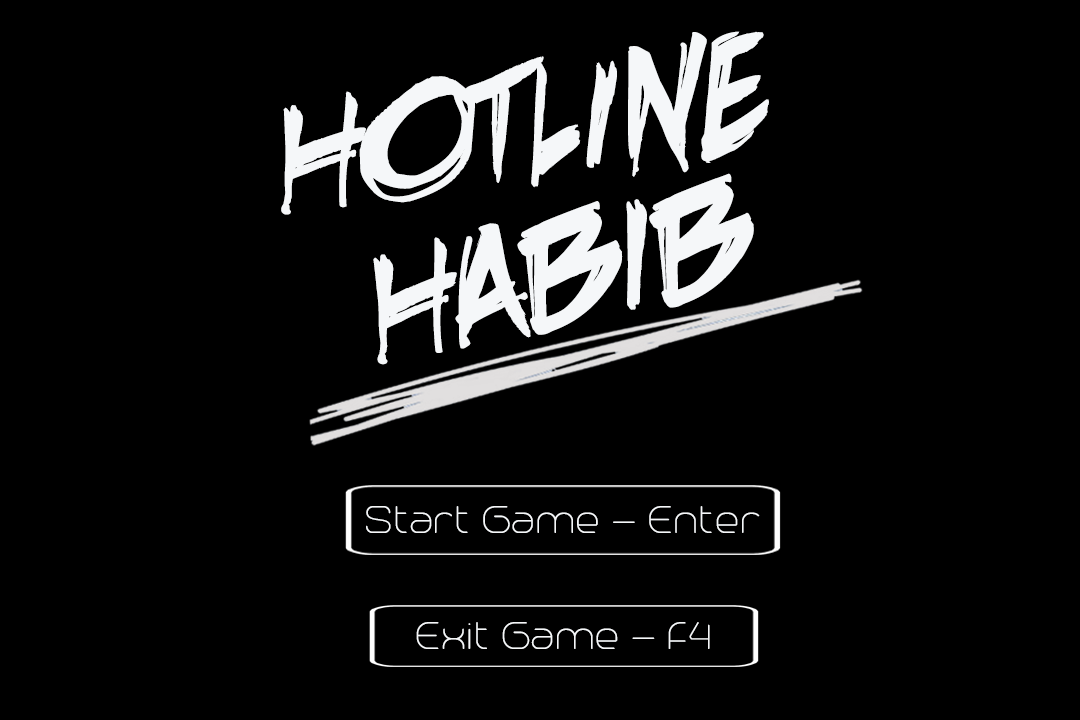
<style>
.page{position:relative;width:1080px;height:720px;background:#000000}
.page>*{position:absolute;margin:0}
.t1{font:200px "DeathRattleBB";color:#f5f7f9}
.t2{font:48px "Trench-Thin";color:#f5f7f9}
</style>
<div class="page">
<p class="t1" style="left:281px;top:31px;width:488px;height:184px;rotate:-8deg">HOTLINE</p>
<p class="t1" style="left:373px;top:173px;width:381px;height:192px;rotate:-12deg">Habib</p>
<p class="t2" style="left:366px;top:506px;width:394px;height:27px">Start Game - Enter</p>
<p class="t2" style="left:416px;top:622px;width:294px;height:27px">Exit Game - F4</p>
</div>
